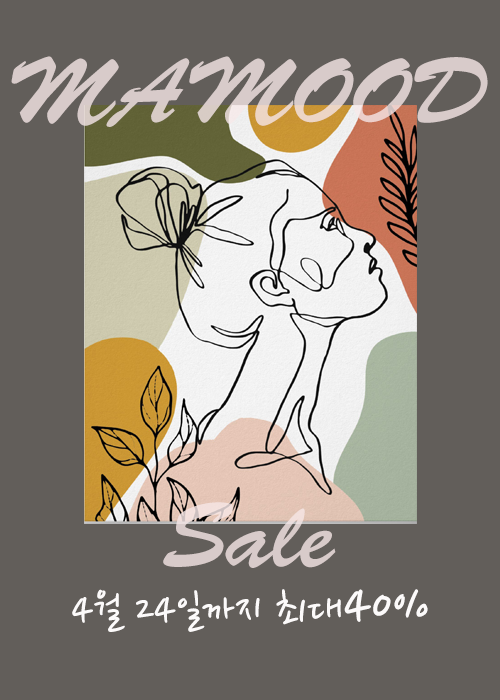
<style>
.page{position:relative;width:500px;height:700px;background:#625e5a}
.page>*{position:absolute;margin:0}
.t1{font:92.5px "BrushScriptStd";color:#d8cbca}
.t2{font:48px "NanumPen";color:#fcfafa}
.t3{font:60px "NanumPen";color:#fcfafa}
</style>
<div class="page">
<p class="t1" style="left:11px;top:56px;width:477px;height:71px">MAMOOD</p>
<p class="t1" style="left:163px;top:502px;width:173px;height:66px">Sale</p>
<p class="t2" style="left:72px;top:589px;width:356px;height:43px">4월 24일까지 최대<span class="t3">40%</span></p>
</div>
